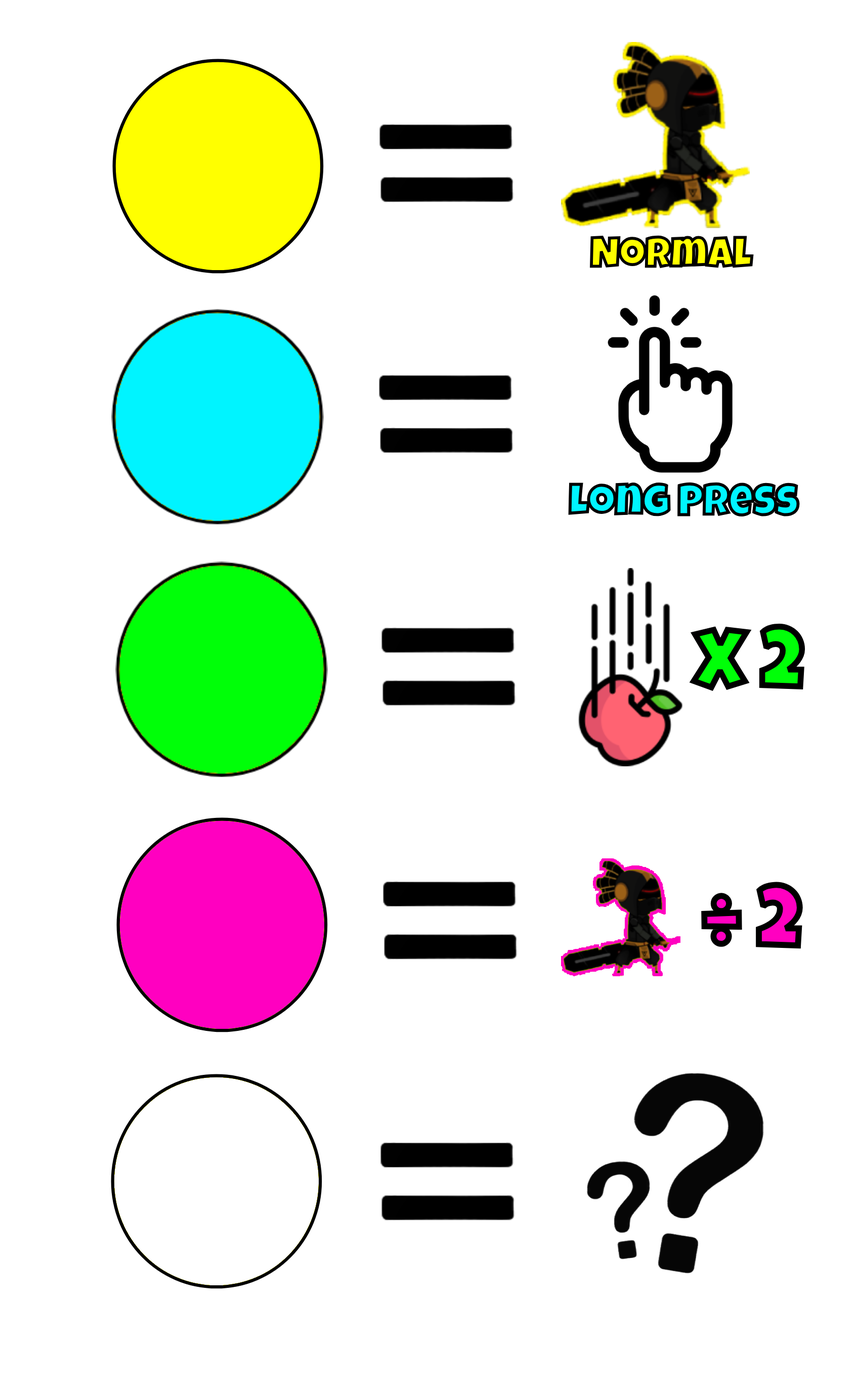
<style>
.page{position:relative;width:858px;height:1390px;background:#ffffff}
.page>*{position:absolute;margin:0}
.t1{font:41.2px "LuckiestGuy-Regular"}
.t2{font:42.5px "LuckiestGuy-Regular"}
.t3{font:83.1px "LuckiestGuy-Regular"}
.t4{font:84px "LuckiestGuy-Regular"}
</style>
<div class="page">
<p class="t1" style="left:590px;top:235px;width:164px;height:33px">Normal</p>
<p class="t2" style="left:568px;top:482px;width:232px;height:34px">Long Press</p>
<p class="t3" style="left:676px;top:609px;width:143px;height:96px">x 2</p>
<p class="t4" style="left:701px;top:882px;width:102px;height:67px">÷ 2</p>
</div>
